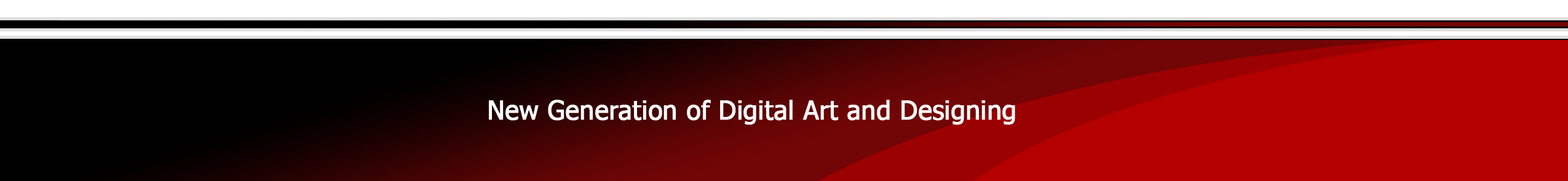
<style>
.page{position:relative;width:1568px;height:181px;background:#b50000}
.page>*{position:absolute;margin:0}
.t1{font:25.6px "Tahoma";color:#ffffff;font-weight:bold}
</style>
<div class="page">
<p class="t1" style="left:489px;top:100px;width:526px;height:25px">New Generation of Digital Art and Designing</p>
</div>
